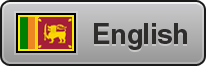
<style>
.page{position:relative;width:206px;height:66px}
.page>*{position:absolute;margin:0}
.t1{font:28px "Helvetica-Bold";letter-spacing:-0.025em;color:#2f2c2c}
</style>
<div class="page">
<p class="t1" style="left:94px;top:23px;width:93px;height:27px">English</p>
</div>
